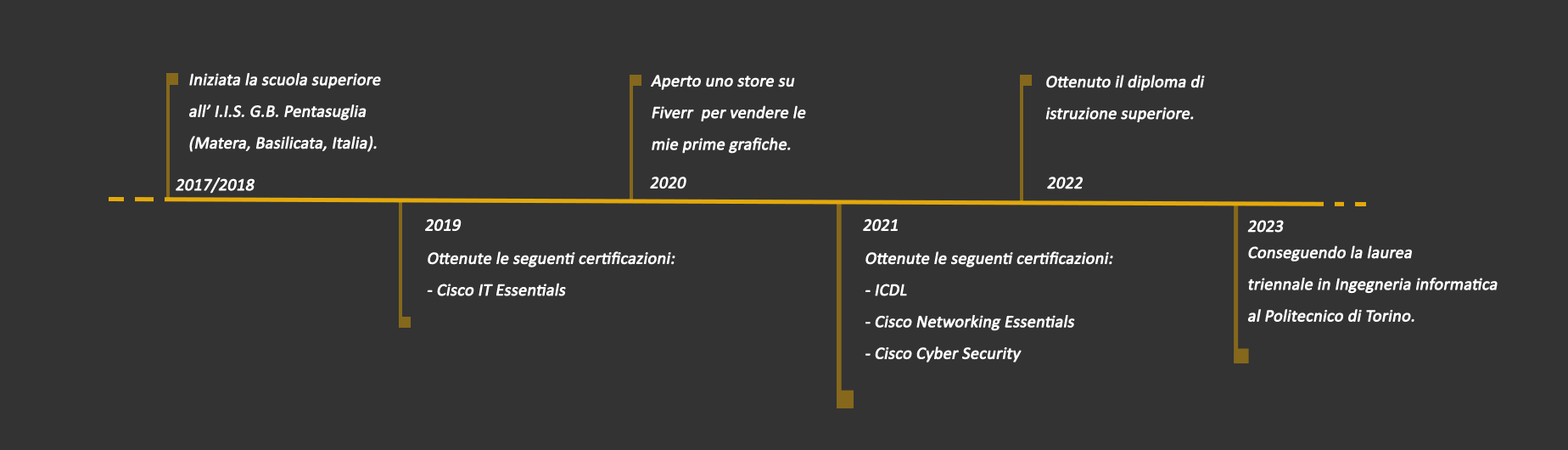
<style>
.page{position:relative;width:1568px;height:450px;background:#333333}
.page>*{position:absolute;margin:0}
.t1{font:17.3px/31.6px "Calibri";letter-spacing:-0.015em;color:#ffffff;font-weight:bold;font-style:italic}
.t2{font:17.3px "Calibri";letter-spacing:-0.015em;color:#ffffff;font-weight:bold;font-style:italic}
</style>
<div class="page">
<p class="t1" style="left:189px;top:73px;width:192px;height:79px">Iniziata la scuola superiore<br>all’ I.I.S. G.B. Pentasuglia<br>(Matera, Basilicata, Italia).</p>
<p class="t1" style="left:651px;top:75px;width:155px;height:79px">Aperto uno store su<br>Fiverr  per vendere le<br>mie prime grafiche.</p>
<p class="t1" style="left:1045px;top:75px;width:160px;height:47px">Ottenuto il diploma di<br>istruzione superiore.</p>
<p class="t2" style="left:176px;top:177px;width:79px;height:16px">2017/2018</p>
<p class="t2" style="left:650px;top:176px;width:36px;height:13px">2020</p>
<p class="t2" style="left:1047px;top:176px;width:36px;height:13px">2022</p>
<p class="t2" style="left:425px;top:219px;width:37px;height:12px">2019</p>
<p class="t2" style="left:863px;top:219px;width:35px;height:12px">2021</p>
<p class="t2" style="left:1247px;top:220px;width:37px;height:12px">2023</p>
<p class="t1" style="left:1247px;top:245px;width:251px;height:77px">Conseguendo la laurea<br>triennale in Ingegneria informatica<br>al Politecnico di Torino.</p>
<p class="t1" style="left:427px;top:251px;width:248px;height:45px">Ottenute le seguenti certificazioni:<br>- Cisco IT Essentials</p>
<p class="t1" style="left:865px;top:251px;width:248px;height:111px">Ottenute le seguenti certificazioni:<br>- ICDL<br>- Cisco Networking Essentials<br>- Cisco Cyber Security</p>
</div>
